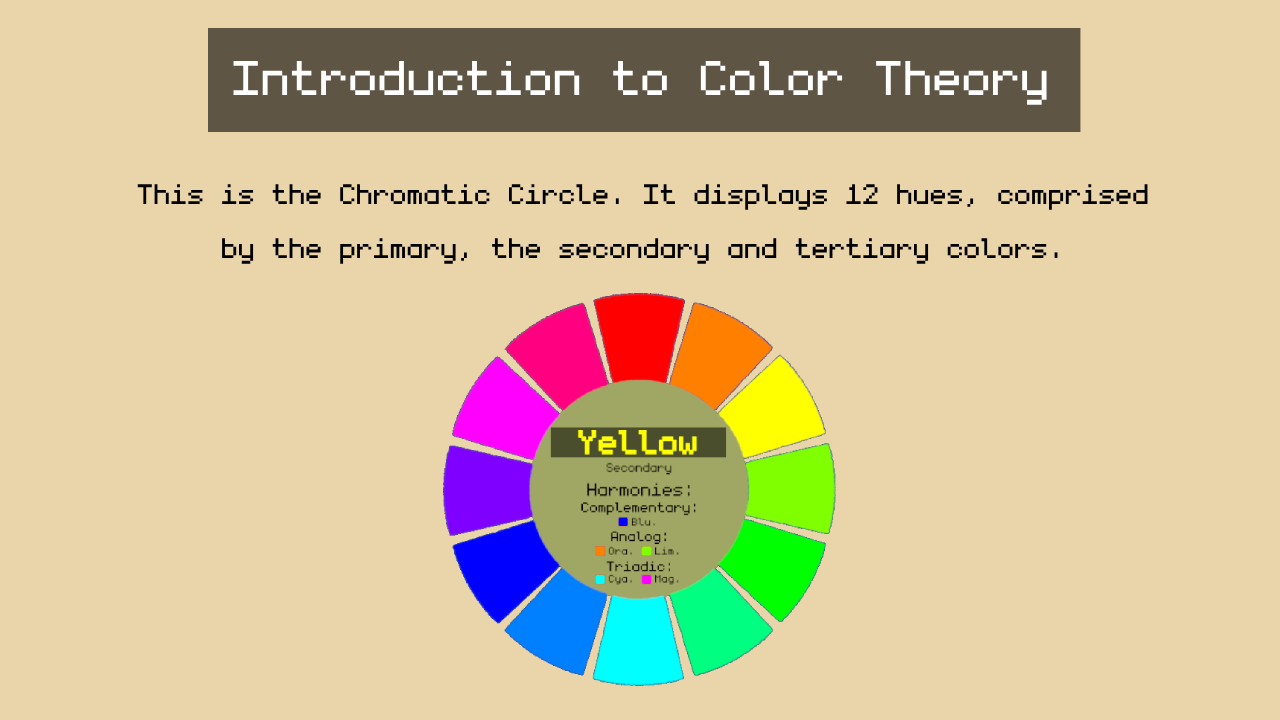
<style>
.page{position:relative;width:1280px;height:720px;background:#ead4aa}
.page>*{position:absolute;margin:0}
.t1{font:77.9px "monogram";color:#ffffff}
.t2{font:45px "monogram";color:#000000}
</style>
<div class="page">
<p class="t1" style="left:233px;top:61px;width:814px;height:44px">Introduction to Color Theory</p>
<p class="t2" style="left:137px;top:184px;width:1011px;height:80px;text-align:center">This is the Chromatic Circle. It displays 12 hues, comprised<br>by the primary, the secondary and tertiary colors.</p>
</div>
